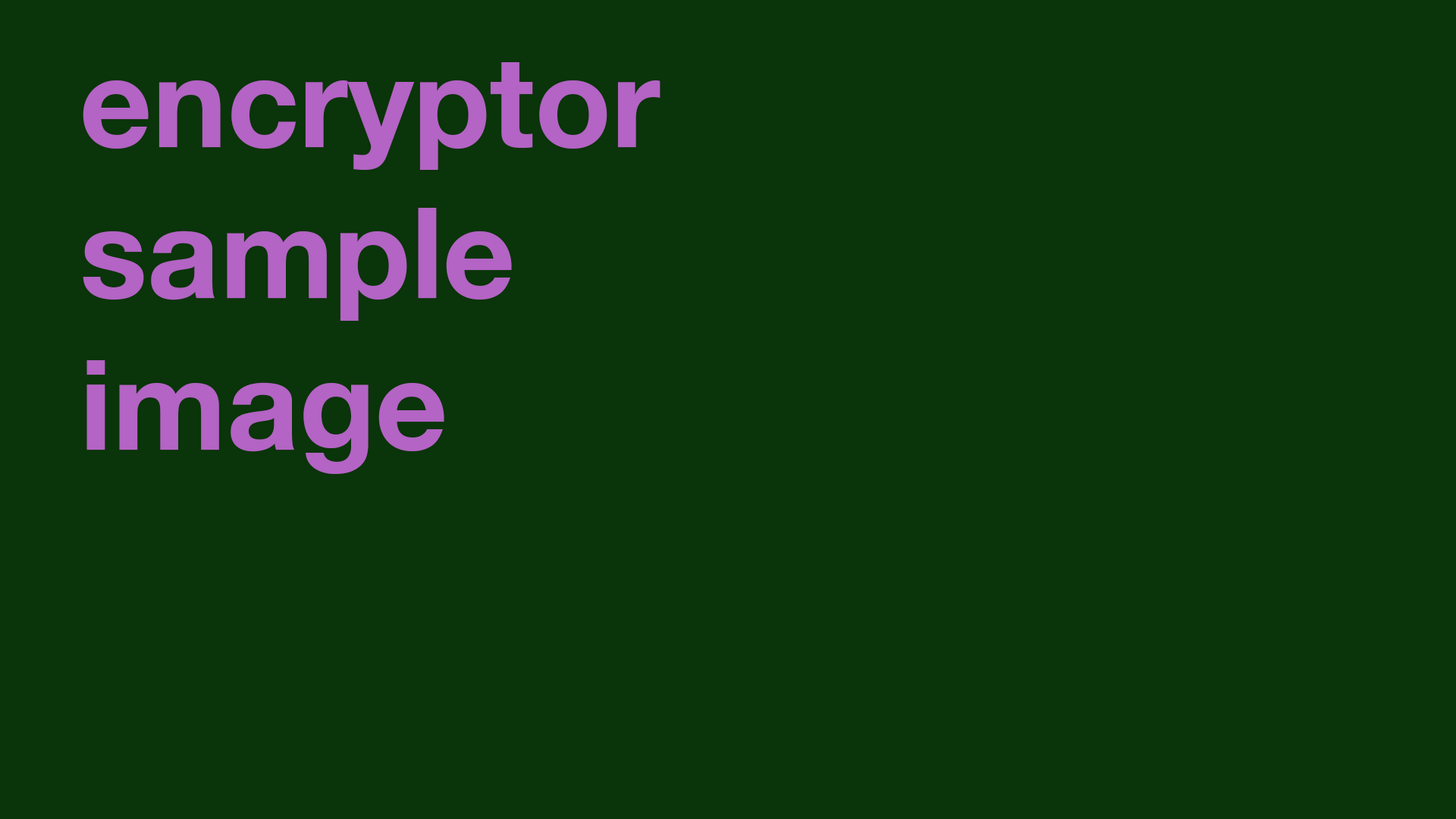
<style>
.page{position:relative;width:1456px;height:819px;background:#0a3409}
.page>*{position:absolute;margin:0}
.t1{font:125.9px "HelveticaNeue-Bold";color:#b364c4}
</style>
<div class="page">
<p class="t1" style="left:83px;top:62px;width:577px;height:412px">encryptor<br>sample<br>image</p>
</div>
